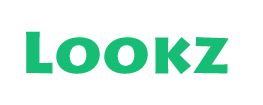
<style>
.page{position:relative;width:263px;height:105px;background:#ffffff}
.page>*{position:absolute;margin:0}
.t1{font:58.3px "LithosPro-Black";color:#15be74}
</style>
<div class="page">
<p class="t1" style="left:26px;top:31px;width:203px;height:44px">Lookz</p>
</div>
